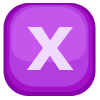
<style>
.page{position:relative;width:100px;height:100px;background:#c456ec}
.page>*{position:absolute;margin:0}
.t1{font:57.1px "MilfordBold";color:#efdafe;scale:1.31 1}
</style>
<div class="page">
<p class="t1" style="left:26px;top:27px;width:48px;height:43px">X</p>
</div>
